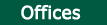
<style>
.page{position:relative;width:107px;height:25px;background:#005941}
.page>*{position:absolute;margin:0}
.t1{font:18px "Tahoma";letter-spacing:0.02em;color:#ffffff;font-weight:bold}
</style>
<div class="page">
<p class="t1" style="left:21px;top:4px;width:60px;height:16px">Offices</p>
</div>
